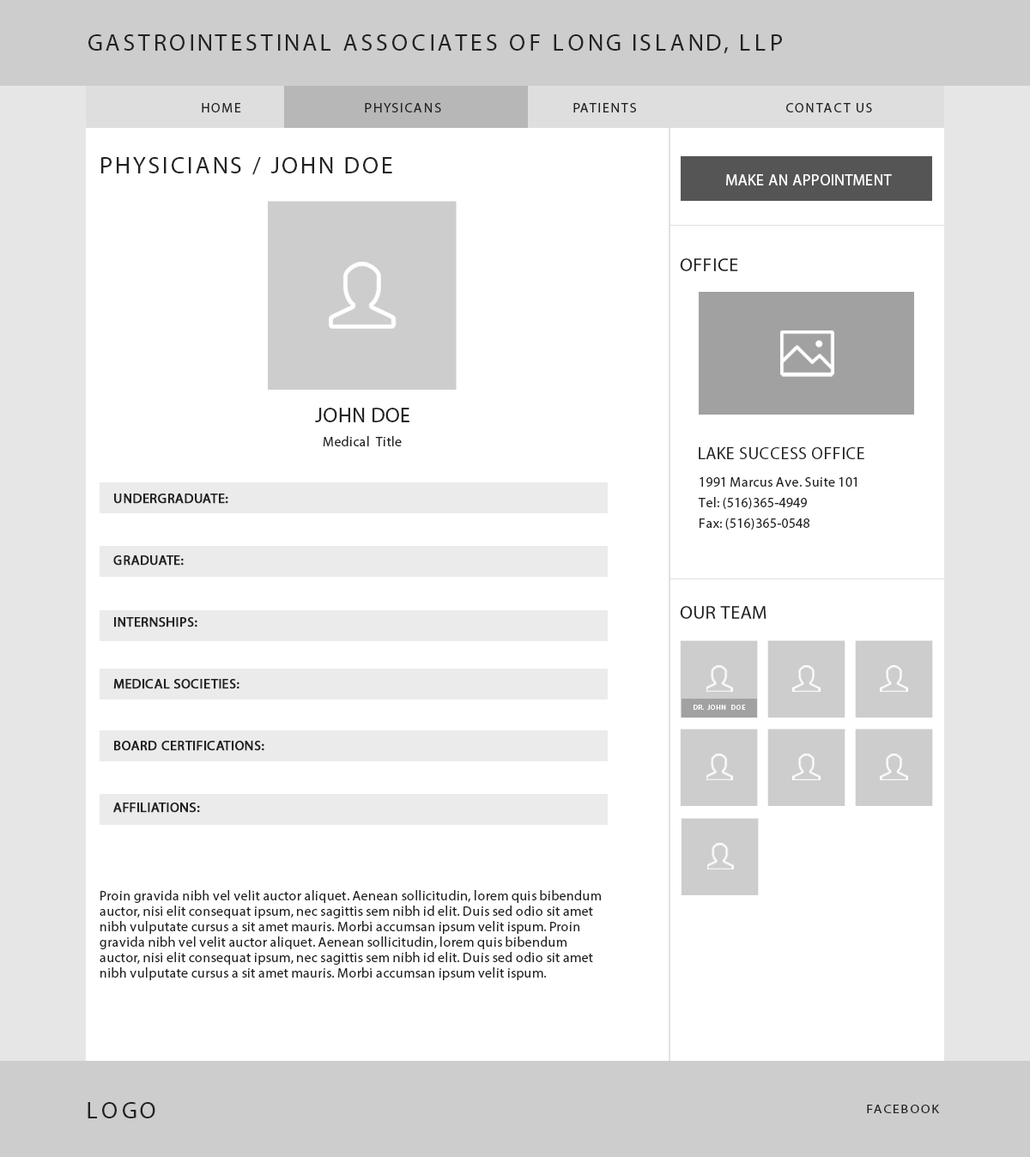
<style>
.page{position:relative;width:1030px;height:1157px;background:#ffffff}
.page>*{position:absolute;margin:0}
.t1{font:24px "MyriadPro-Regular";letter-spacing:0.12em;color:#222222;text-transform:uppercase}
.t2{font:13.7px "MyriadPro-Regular";letter-spacing:0.1em;color:#222222;text-transform:uppercase}
.t3{font:24px "MyriadPro-Regular";letter-spacing:0.1em;color:#222222;text-transform:uppercase}
.t4{font:15.5px "MyriadPro-Regular";letter-spacing:0.02em;color:#ffffff;text-transform:uppercase}
.t5{font:18.9px "MyriadPro-Regular";letter-spacing:0.02em;color:#222222;text-transform:uppercase}
.t6{font:20.6px "MyriadPro-Regular";letter-spacing:0.02em;color:#222222;text-transform:uppercase}
.t7{font:13.7px "MyriadPro-Regular";letter-spacing:0.02em;color:#222222}
.t8{font:17.2px "MyriadPro-Regular";letter-spacing:0.02em;color:#222222;text-transform:uppercase}
.t9{font:13.7px/20.6px "MyriadPro-Regular";letter-spacing:0.02em;color:#222222}
.t10{font:13.7px/15.5px "MyriadPro-Regular";letter-spacing:0.02em;color:#222222;text-transform:uppercase;font-weight:bold}
.t11{font:6.9px "MyriadPro-Regular";letter-spacing:0.1em;color:#ffffff;text-transform:uppercase}
.t12{font:13.7px/15.5px "MyriadPro-Regular";letter-spacing:0.02em;color:#222222}
.t13{font:11.6px "MyriadPro-Regular";letter-spacing:0.1em;color:#222222;text-transform:uppercase;scale:1.18 1}
</style>
<div class="page">
<p class="t1" style="left:88px;top:34px;width:694px;height:19px">Gastrointestinal Associates of Long Island, LLP</p>
<p class="t2" style="left:202px;top:103px;width:670px;height:9px">Home             Physicans   Patients   Contact Us</p>
<p class="t3" style="left:101px;top:157px;width:291px;height:18px">PhysicianS / JOHN DOE</p>
<p class="t4" style="left:726px;top:174px;width:166px;height:11px">MAKE an Appointment</p>
<p class="t5" style="left:680px;top:258px;width:58px;height:13px">Office</p>
<p class="t6" style="left:315px;top:408px;width:95px;height:14px">John doe</p>
<p class="t7" style="left:323px;top:436px;width:79px;height:10px">Medical  Title</p>
<p class="t8" style="left:699px;top:447px;width:166px;height:12px">lAKE sUCCESS oFFICE</p>
<p class="t9" style="left:698px;top:477px;width:159px;height:53px">1991 Marcus Ave. Suite 101<br>Tel: (516)365-4949<br>Fax: (516)365-0548</p>
<p class="t10" style="left:113px;top:494px;width:151px;height:319px">Undergraduate:<br><br><br><br>Graduate:<br><br><br><br>Internships:<br><br><br><br>medical Societies:<br><br><br><br>board certifications:<br><br><br><br>Affiliations:</p>
<p class="t5" style="left:680px;top:606px;width:87px;height:13px">Our Team</p>
<p class="t11" style="left:694px;top:705px;width:52px;height:5px">Dr. John  Doe</p>
<p class="t12" style="left:100px;top:890px;width:501px;height:90px">Proin gravida nibh vel velit auctor aliquet. Aenean sollicitudin, lorem quis bibendum auctor, nisi elit consequat ipsum, nec sagittis sem nibh id elit. Duis sed odio sit amet nibh vulputate cursus a sit amet mauris. Morbi accumsan ipsum velit ispum. Proin gravida nibh vel velit auctor aliquet. Aenean sollicitudin, lorem quis bibendum auctor, nisi elit consequat ipsum, nec sagittis sem nibh id elit. Duis sed odio sit amet nibh vulputate cursus a sit amet mauris. Morbi accumsan ipsum velit ispum.</p>
<p class="t1" style="left:88px;top:1102px;width:67px;height:17px">LOGO</p>
<p class="t13" style="left:867px;top:1105px;width:73px;height:9px">Facebook</p>
</div>
